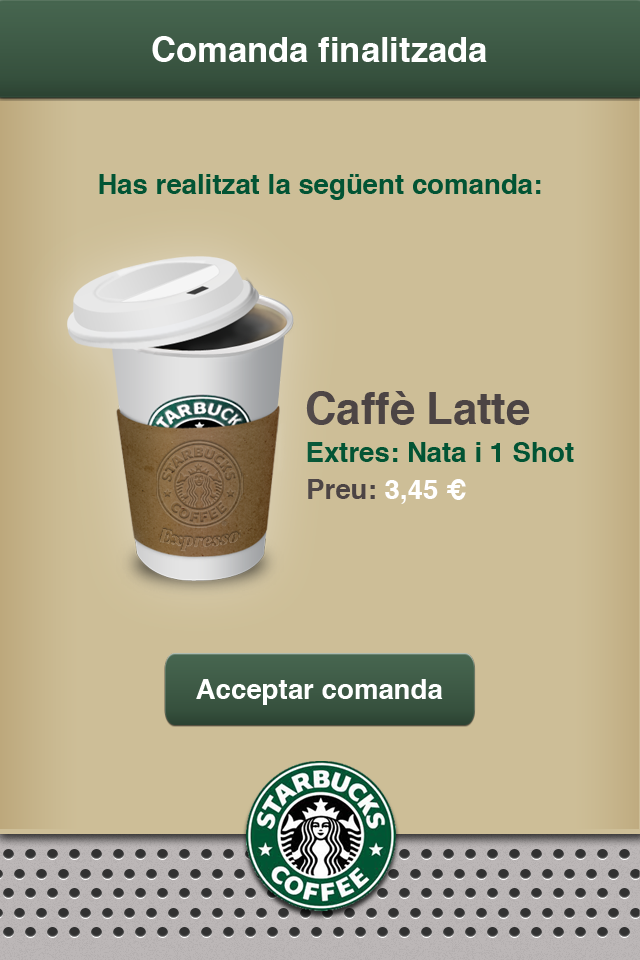
<style>
.page{position:relative;width:640px;height:960px;background:#cdbe97}
.page>*{position:absolute;margin:0}
.t1{font:34.6px "Helvetica-Bold";color:#ffffff}
.t2{font:27.6px "Helvetica-Bold";color:#025434}
.t3{font:43.6px "Helvetica-Bold";color:#4c4444}
.t4{font:27.6px "Helvetica-Bold";color:#ffffff}
</style>
<div class="page">
<p class="t1" style="left:152px;top:36px;width:335px;height:26px">Comanda finalitzada</p>
<p class="t2" style="left:99px;top:174px;width:442px;height:26px">Has realitzat la següent comanda:</p>
<p class="t3" style="left:306px;top:391px;width:224px;height:34px">Caffè Latte</p>
<p class="t2" style="left:307px;top:442px;width:267px;height:20px">Extres: Nata i 1 Shot</p>
<p class="t4" style="left:196px;top:679px;width:247px;height:26px">Acceptar comanda</p>
</div>
